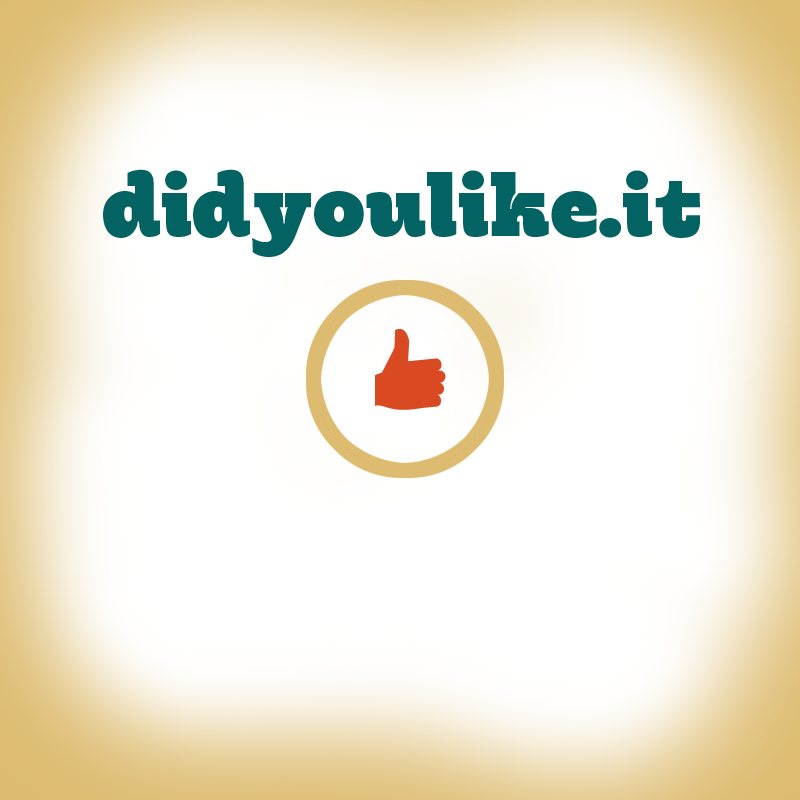
<style>
.page{position:relative;width:800px;height:800px;background:#ffffff}
.page>*{position:absolute;margin:0}
.t1{font:86px "Hernandez-Bold";color:#026362}
</style>
<div class="page">
<p class="t1" style="left:103px;top:169px;width:597px;height:88px">didyoulike.it</p>
</div>
